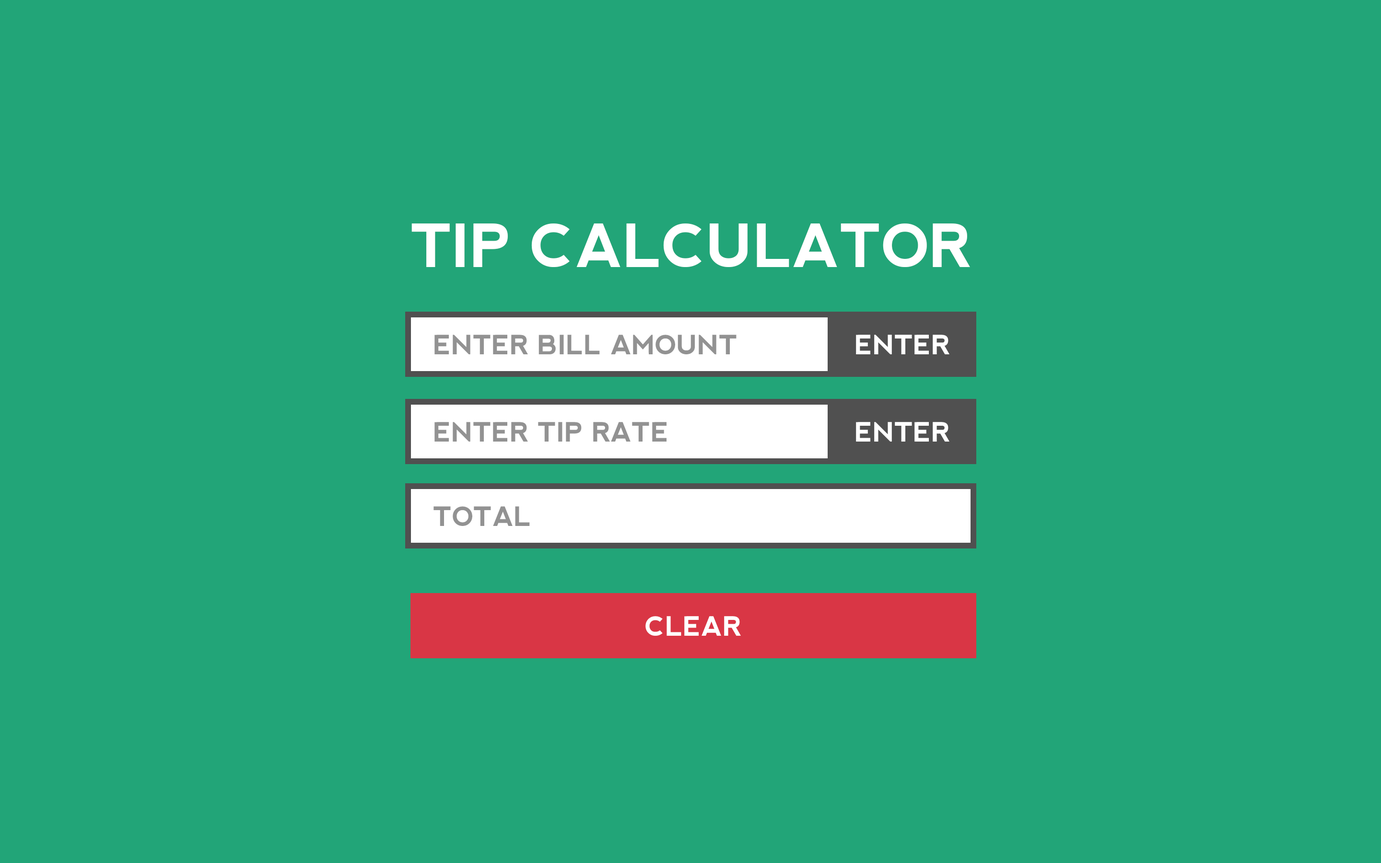
<style>
.page{position:relative;width:1381px;height:863px;background:#22a578}
.page>*{position:absolute;margin:0}
.t1{font:59.3px "nevis-Bold";color:#ffffff;text-transform:uppercase}
.t2{font:26.7px "nevis-Bold";color:#929292;text-transform:uppercase}
.t3{font:26.7px "nevis-Bold";color:#ffffff;text-transform:uppercase}
</style>
<div class="page">
<p class="t1" style="left:412px;top:223px;width:558px;height:44px">TIP CALCULATOR</p>
<p class="t2" style="left:435px;top:335px;width:302px;height:19px">ENTER BILL AMOUNT</p>
<p class="t3" style="left:856px;top:335px;width:94px;height:19px">ENTER</p>
<p class="t2" style="left:435px;top:422px;width:232px;height:20px">ENTER tip rate</p>
<p class="t3" style="left:856px;top:422px;width:94px;height:20px">ENTER</p>
<p class="t2" style="left:434px;top:506px;width:96px;height:20px">total</p>
<p class="t3" style="left:646px;top:616px;width:95px;height:20px">clear</p>
</div>
